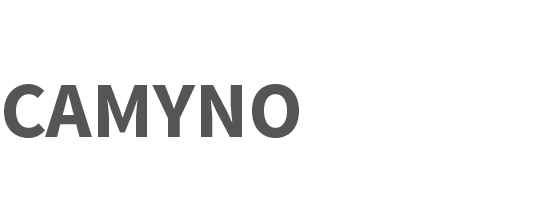
<style>
.page{position:relative;width:550px;height:220px;background:#ffffff}
.page>*{position:absolute;margin:0}
.t1{font:80px "SourceSansPro-Bold";color:#555555}
</style>
<div class="page">
<p class="t1" style="left:4px;top:84px;width:295px;height:54px">CAMYNO</p>
</div>
